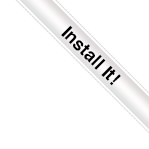
<style>
.page{position:relative;width:149px;height:149px;background:#ffffff}
.page>*{position:absolute;margin:0}
.t1{font:18px "Helvetica-Bold";color:#000000}
</style>
<div class="page">
<p class="t1" style="left:61px;top:25px;width:60px;height:61px;rotate:45deg">Install It!</p>
</div>
